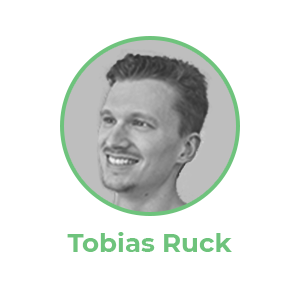
<style>
.page{position:relative;width:300px;height:300px;background:#ffffff}
.page>*{position:absolute;margin:0}
.t1{font:26px "Montserrat-Bold";color:#6ec37c}
</style>
<div class="page">
<p class="t1" style="left:67px;top:232px;width:165px;height:20px">Tobias Ruck</p>
</div>
